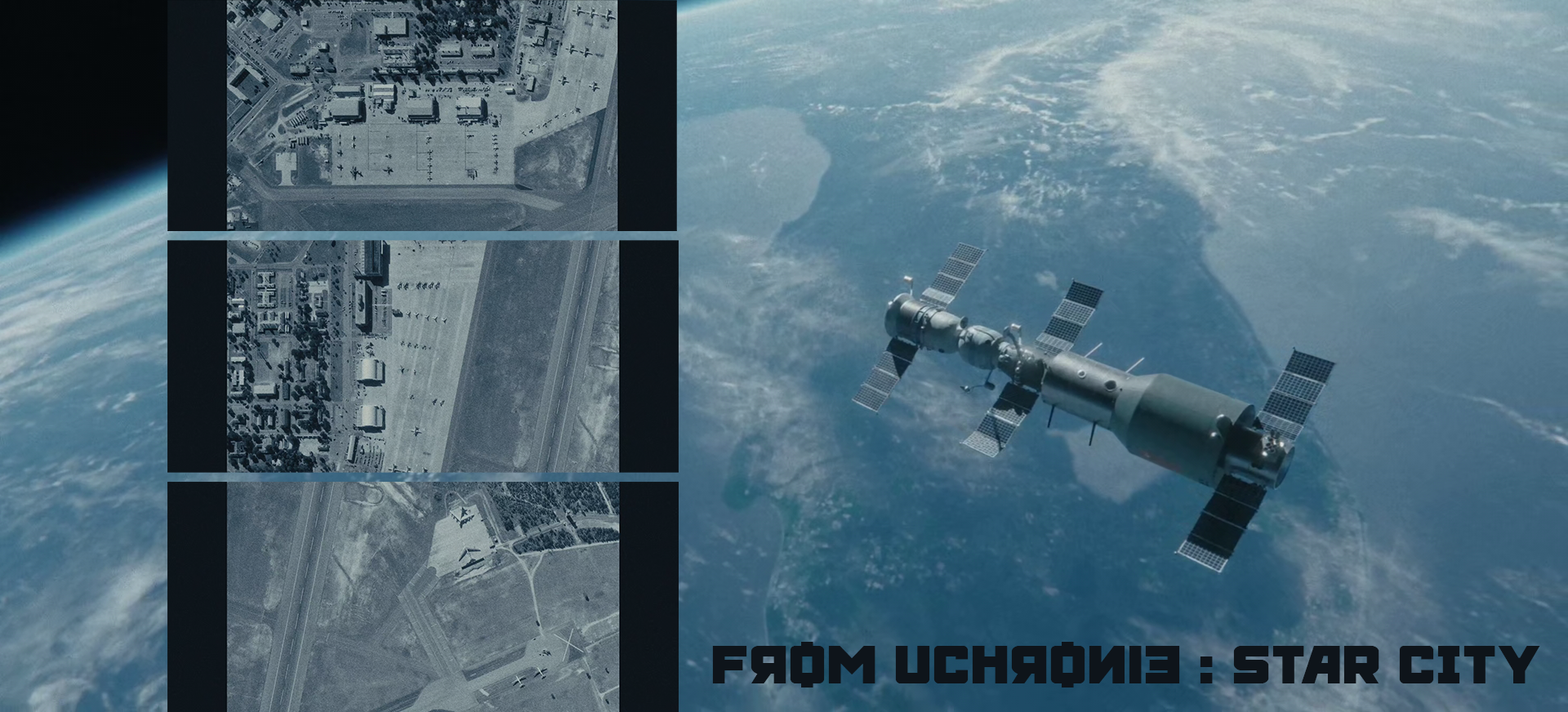
<style>
.page{position:relative;width:1568px;height:712px}
.page>*{position:absolute;margin:0}
.t1{font:62.7px "Kremlingrad";color:#0e141a}
</style>
<div class="page">
<p class="t1" style="left:712px;top:642px;width:828px;height:46px">from uchronie : STAR CITY</p>
</div>
